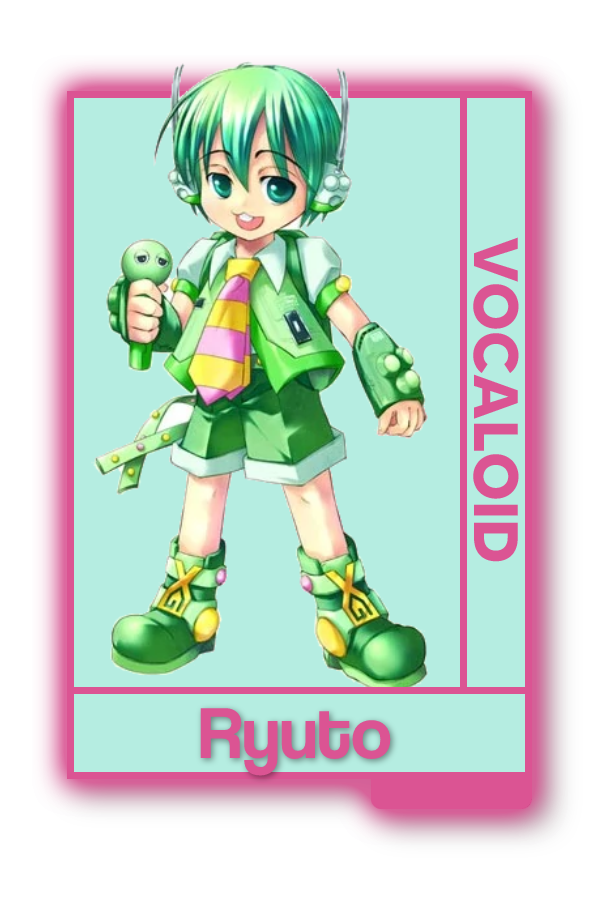
<style>
.page{position:relative;width:600px;height:900px;background:#b5ede1}
.page>*{position:absolute;margin:0}
.t1{font:62.5px "MADETOMMY-Bold";color:#db5493}
.t2{font:75px "CoolveticaRg-Regular";color:#db5493}
</style>
<div class="page">
<p class="t1" style="left:473px;top:237px;width:46px;height:325px;rotate:90deg">VOCALOID</p>
<p class="t2" style="left:200px;top:708px;width:191px;height:68px">Ryuto</p>
</div>
